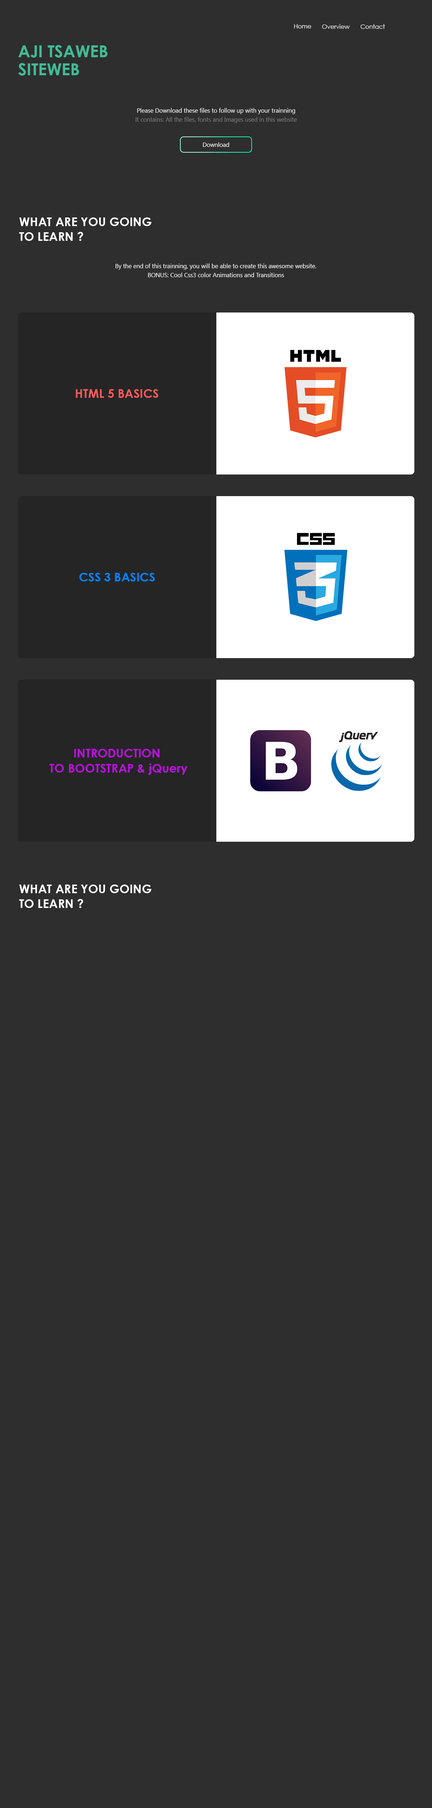
<style>
.page{position:relative;width:432px;height:1808px;background:#2e2e2e}
.page>*{position:absolute;margin:0}
.t1{font:6px "CenturyGothic";color:#ffffff}
.t2{font:16.5px/18px "CenturyGothic-Bold";color:#41bb96}
.t3{font:6px/9px "Gadugi";color:#7d7d7d}
.t4{font:6px/9px "Gadugi";color:#ffffff}
.t5{font:6px "Gadugi";color:#ffffff}
.t6{font:12px/15px "CenturyGothic-Bold";color:#ffffff}
.t7{font:12px "CenturyGothic-Bold";color:#ff5a5a}
.t8{font:12px "CenturyGothic-Bold";color:#0084ff}
.t9{font:12px/15px "CenturyGothic-Bold";color:#bd0fe1}
</style>
<div class="page">
<p class="t1" style="left:294px;top:24px;width:17px;height:4px">Home</p>
<p class="t1" style="left:322px;top:24px;width:28px;height:5px">Overview</p>
<p class="t1" style="left:360px;top:24px;width:25px;height:5px">Contact</p>
<p class="t2" style="left:18px;top:45px;width:90px;height:31px;text-align:right">AJI TSAWEB<br>SITEWEB</p>
<p class="t3" style="left:135px;top:108px;width:162px;height:15px;text-align:center"><span class="t4">Please Download these files to follow up with your trainning<br></span>It contains: All the files, fonts and Images used in this website</p>
<p class="t5" style="left:203px;top:142px;width:26px;height:5px">Download</p>
<p class="t6" style="left:19px;top:217px;width:133px;height:24px;text-align:right">WHAT ARE YOU GOING <br>TO LEARN ?</p>
<p class="t4" style="left:116px;top:264px;width:200px;height:13px;text-align:center">By the end of this trainning, you will be able to create this awesome website.<br>BONUS: Cool Css3 color Animations and Transitions</p>
<p class="t7" style="left:76px;top:389px;width:82px;height:9px">HTML 5 BASICS</p>
<p class="t8" style="left:79px;top:573px;width:76px;height:8px">CSS 3 BASICS</p>
<p class="t9" style="left:49px;top:749px;width:139px;height:26px;text-align:center">INTRODUCTION <br>TO BOOTSTRAP &amp; jQuery</p>
<p class="t6" style="left:19px;top:885px;width:133px;height:23px;text-align:right">WHAT ARE YOU GOING <br>TO LEARN ?</p>
</div>
